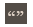
<style>
.page{position:relative;width:33px;height:27px;background:#ffffff}
.page>*{position:absolute;margin:0}
.t1{font:20px "Georgia";color:#ded1c5}
</style>
<div class="page">
<p class="t1" style="left:8px;top:11px;width:16px;height:5px">“”</p>
</div>
